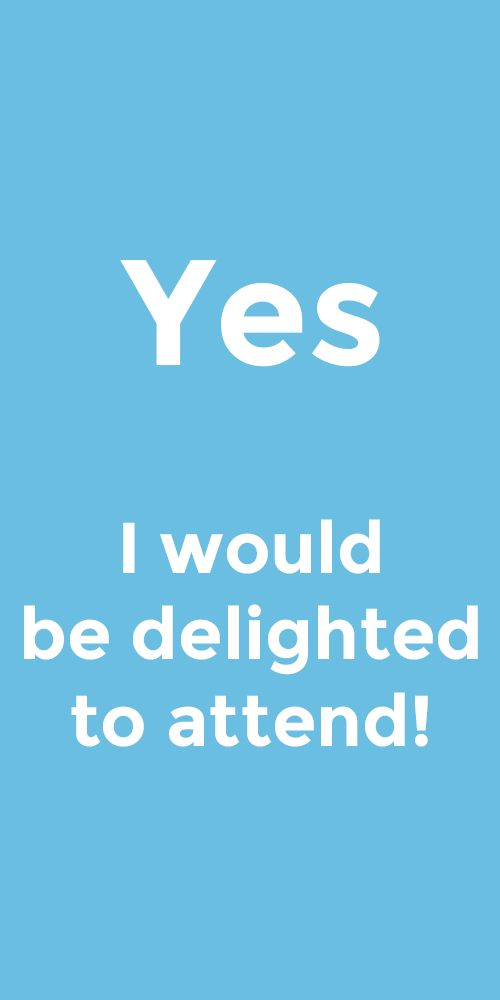
<style>
.page{position:relative;width:500px;height:1000px;background:#6abee1}
.page>*{position:absolute;margin:0}
.t1{font:150px "Montserrat-Bold";color:#ffffff}
.t2{font:72px "Montserrat-Bold";color:#ffffff}
</style>
<div class="page">
<p class="t1" style="left:120px;top:260px;width:260px;height:107px">Yes</p>
<p class="t2" style="left:24px;top:519px;width:454px;height:228px;text-align:center">I would<br>be delighted<br>to attend!</p>
</div>
